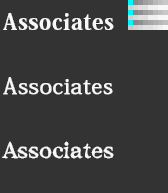
<style>
.page{position:relative;width:168px;height:193px;background:#333333}
.page>*{position:absolute;margin:0}
.t1{font:22px/64px "KozMinPro-Heavy";letter-spacing:0.022em;color:#f8f8f8}
.t2{font:22px/64px "AdobeFangsongStd-Regular";letter-spacing:0.028em;color:#f8f8f8;font-weight:bold}
.t3{font:22px/64px "ComicMysteryStd-DB";letter-spacing:-0.006em;color:#f8f8f8}
</style>
<div class="page">
<p class="t1" style="left:2px;top:13px;width:112px;height:146px">Associates<br><span class="t2">Associates<br></span><span class="t3">Associates</span></p>
</div>
